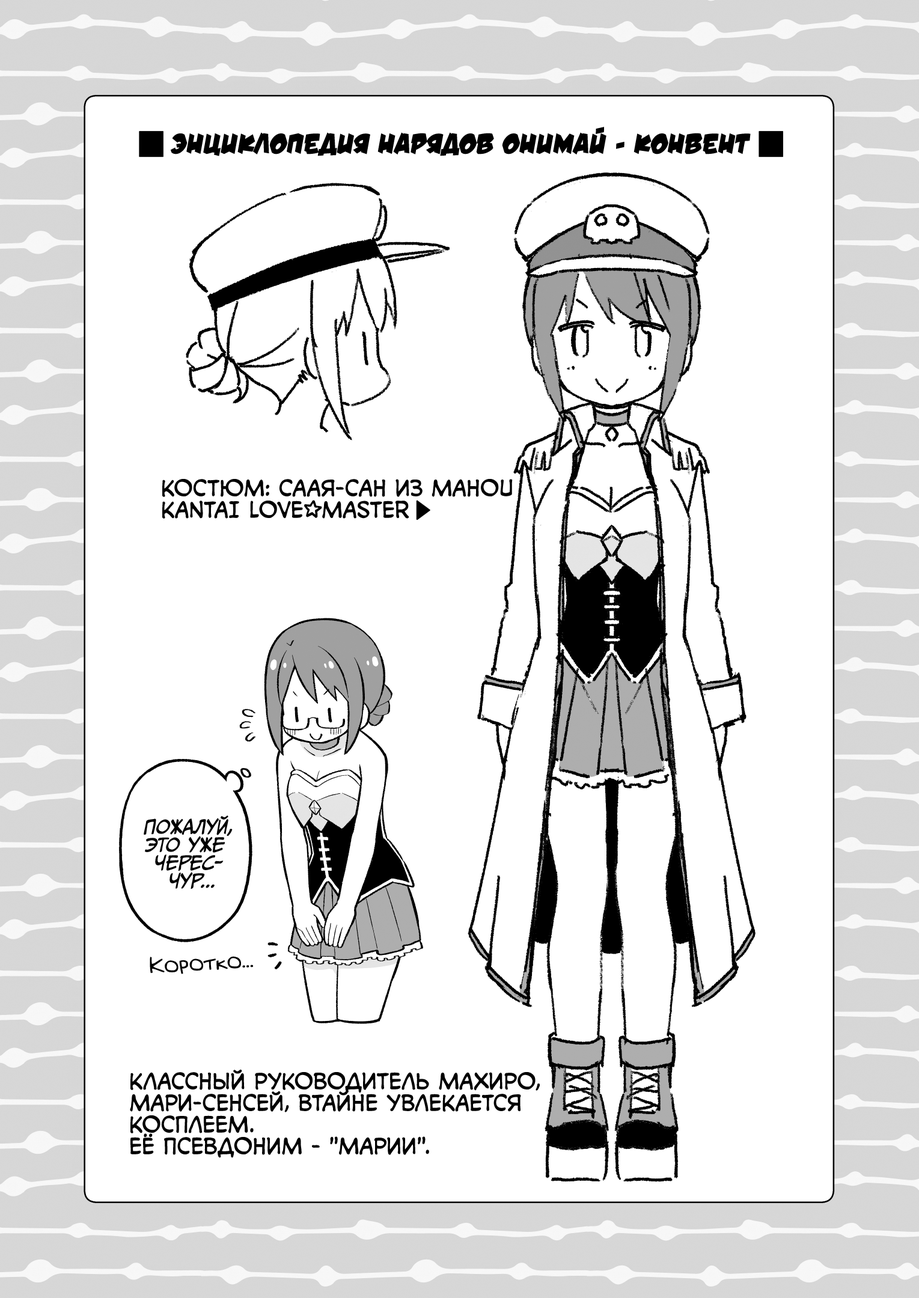
<style>
.page{position:relative;width:919px;height:1298px;background:#ffffff}
.page>*{position:absolute;margin:0}
.t1{font:28.8px "v_DamnNoisyKids";color:#000000;text-transform:uppercase}
.t2{font:21.6px "v_CCMonologous";color:#000000;text-transform:uppercase}
.t3{font:21.6px "KuraiVoice2";color:#000000;text-transform:uppercase}
.t4{font:18px "CCMeanwhile";color:#000000;text-transform:uppercase;font-style:italic}
.t5{font:21.6px "v_Augie";color:#000000}
</style>
<div class="page">
<p class="t1" style="left:171px;top:127px;width:579px;height:29px">Энциклопедия нарядов Онимай - конвент</p>
<p class="t2" style="left:162px;top:479px;width:351px;height:40px">Костюм: Саая-сан из Mahou<br>Kantai Love<span class="t3">☆</span>Master</p>
<p class="t4" style="left:144px;top:815px;width:89px;height:74px;text-align:center">Пожалуй,<br>это уже<br>черес-<br>чур...</p>
<p class="t5" style="left:150px;top:956px;width:103px;height:18px;rotate:-4deg">Коротко...</p>
<p class="t2" style="left:130px;top:1070px;width:410px;height:88px">Классный руководитель Махиро,<br>Мари-сенсей, втайне увлекается<br>косплеем.<br>Её псевдоним - "Марии".</p>
</div>
